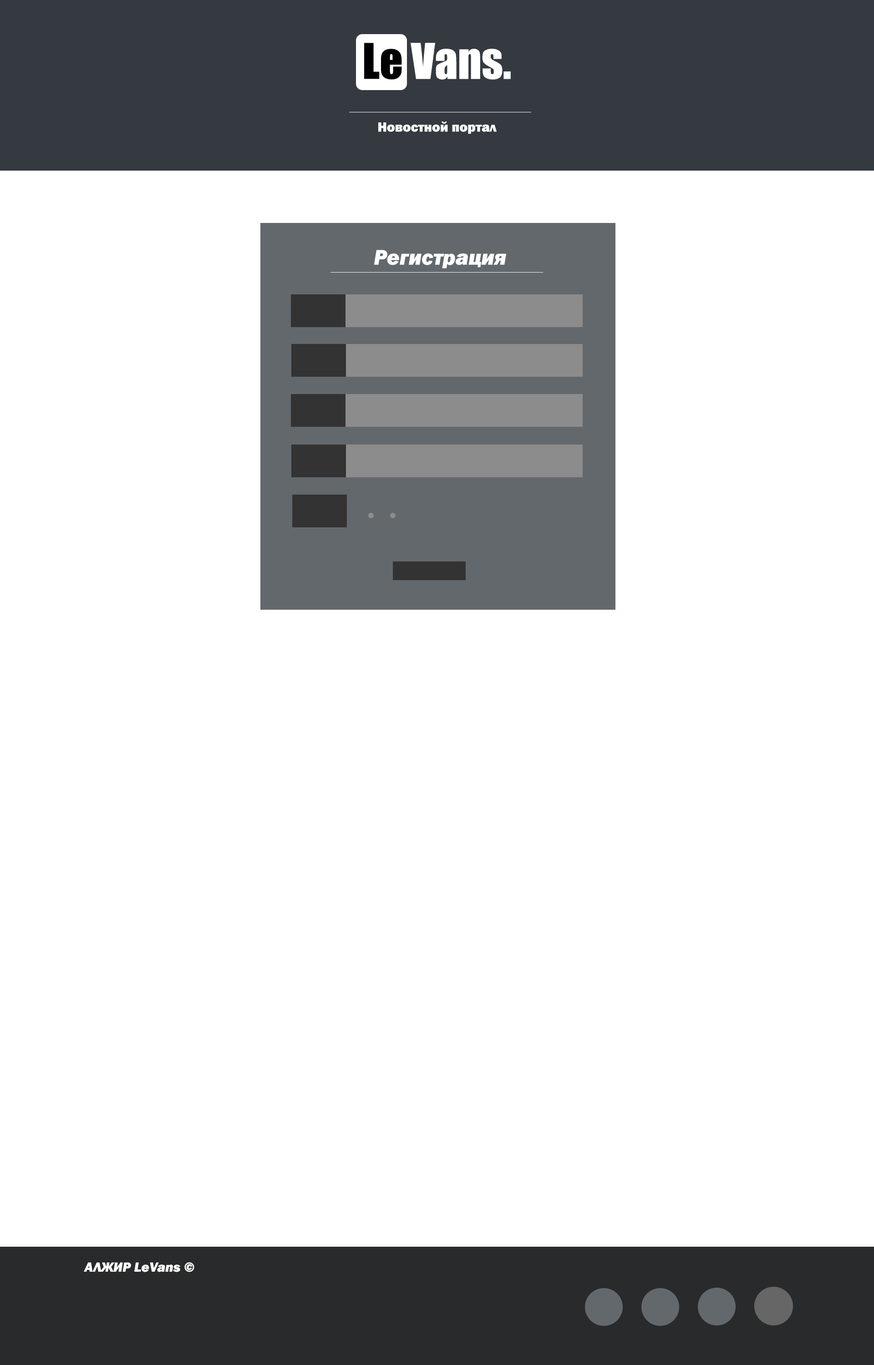
<style>
.page{position:relative;width:874px;height:1365px;background:#ffffff}
.page>*{position:absolute;margin:0}
.t1{font:13.6px "FranklinGothic-Heavy";color:#ffffff}
.t2{font:21.8px "FranklinGothic-HeavyItalic";color:#ffffff}
.t3{font:13.6px "FranklinGothic-HeavyItalic";color:#ffffff}
</style>
<div class="page">
<p class="t1" style="left:378px;top:121px;width:118px;height:13px">Новостной портал</p>
<p class="t2" style="left:374px;top:250px;width:132px;height:18px">Регистрация</p>
<p class="t3" style="left:84px;top:1262px;width:110px;height:10px">АЛЖИР LeVans ©</p>
</div>
